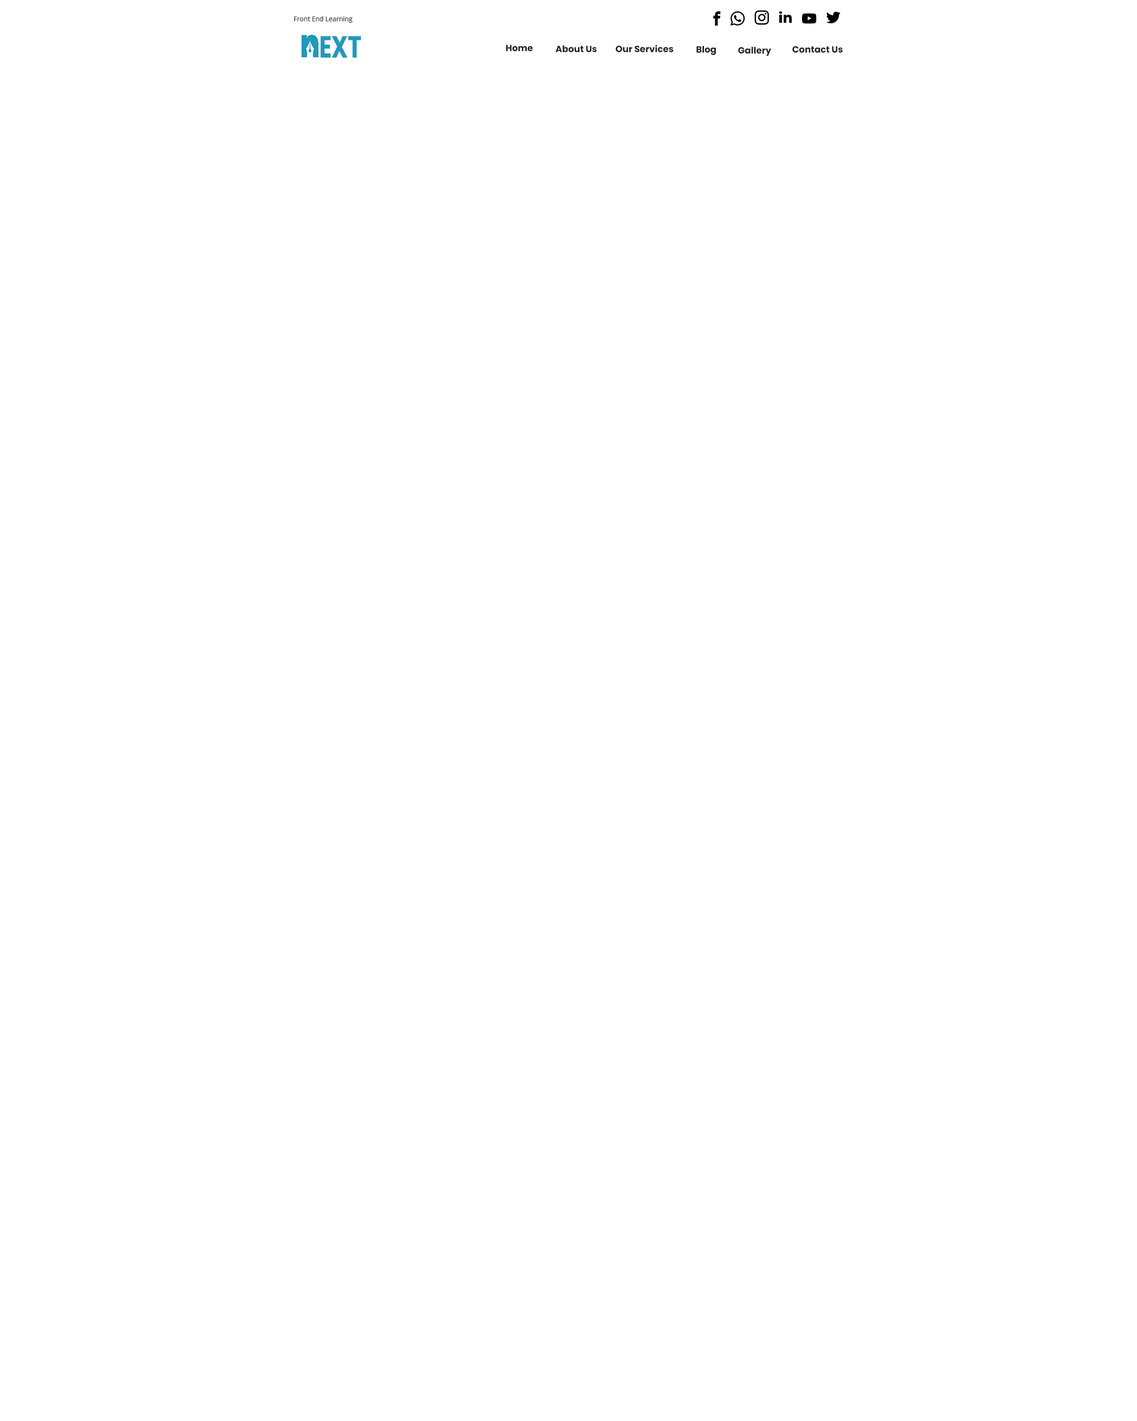
<style>
.page{position:relative;width:1137px;height:1421px;background:#ffffff}
.page>*{position:absolute;margin:0}
.t1{font:6.6px "OpenSans";color:#222222}
.t2{font:9px "Poppins-Bold";color:#222222}
</style>
<div class="page">
<p class="t1" style="left:294px;top:16px;width:58px;height:7px">Front End Learning</p>
<p class="t2" style="left:506px;top:45px;width:27px;height:7px">Home</p>
<p class="t2" style="left:555px;top:45px;width:42px;height:8px">About Us</p>
<p class="t2" style="left:615px;top:45px;width:58px;height:8px">Our Services</p>
<p class="t2" style="left:696px;top:46px;width:20px;height:9px">Blog</p>
<p class="t2" style="left:738px;top:47px;width:33px;height:9px">Gallery</p>
<p class="t2" style="left:792px;top:46px;width:51px;height:7px">Contact Us</p>
</div>
